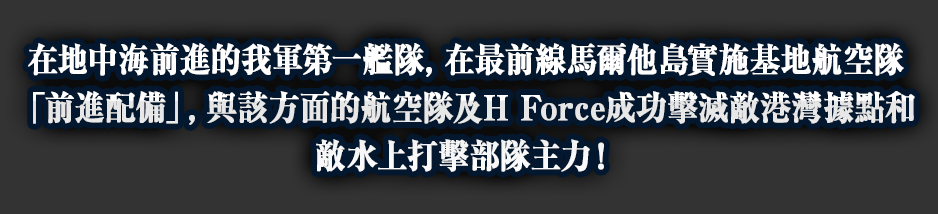
<style>
.page{position:relative;width:938px;height:214px;background:#333333}
.page>*{position:absolute;margin:0}
.t1{font:34px/48px "RyuminPro-ExBold";color:#ffffff;font-weight:bold;scale:0.9 1}
</style>
<div class="page">
<p class="t1" style="left:28px;top:43px;width:887px;height:129px;text-align:center">在地中海前進的我軍第一艦隊，在最前線馬爾他島實施基地航空隊<br>「前進配備」，與該方面的航空隊及H Force成功擊滅敵港灣據點和<br>敵水上打擊部隊主力！</p>
</div>
